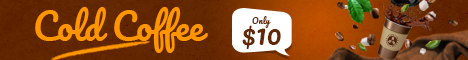
<style>
.page{position:relative;width:468px;height:60px}
.page>*{position:absolute;margin:0}
.t1{font:35.8px "Pacifico-Regular";color:#ff9600}
.t2{font:8.4px "Pacifico-Regular";color:#622700}
.t3{font:28.2px "Pacifico-Regular";color:#622700}
</style>
<div class="page">
<p class="t1" style="left:35px;top:7px;width:173px;height:46px">Cold Coffee</p>
<p class="t2" style="left:252px;top:16px;width:19px;height:12px">Only</p>
<p class="t3" style="left:242px;top:25px;width:39px;height:24px">$10</p>
</div>
